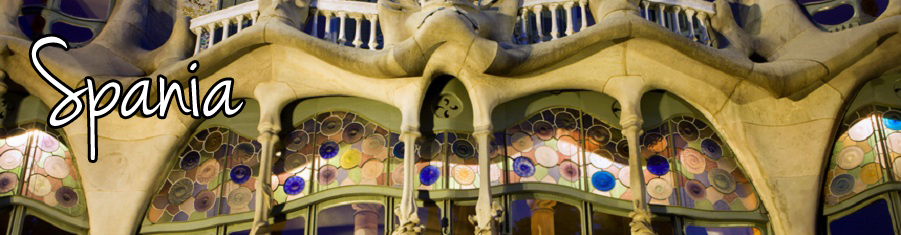
<style>
.page{position:relative;width:901px;height:235px}
.page>*{position:absolute;margin:0}
.t1{font:120px "JennaSue";color:#ffffff}
</style>
<div class="page">
<p class="t1" style="left:31px;top:36px;width:212px;height:124px">Spania</p>
</div>
